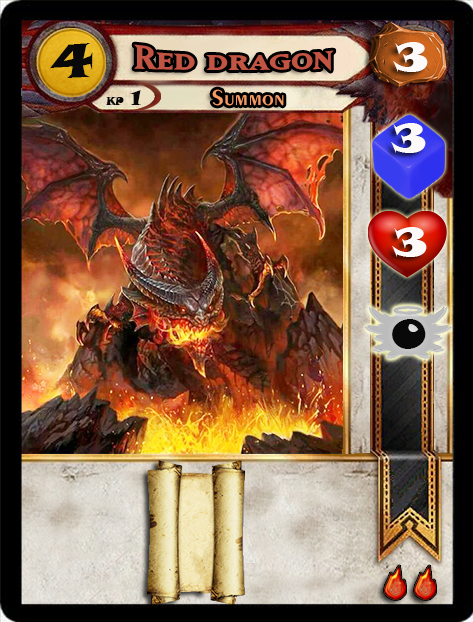
<style>
.page{position:relative;width:473px;height:622px}
.page>*{position:absolute;margin:0}
.t1{font:46.6px "SnapITC-Regular";color:#090909;scale:1.05 1}
.t2{font:40px "SnapITC-Regular";color:#fef9f9;scale:1.05 1}
.t3{font:22.7px "Exotic350BT-DemiBold";color:#f89c64;scale:1.06 1}
.t4{font:20.5px "SnapITC-Regular";color:#090909}
.t5{font:40px "SnapITC-Regular";color:#090909;scale:1.05 1}
</style>
<div class="page">
<p class="t1" style="left:50px;top:43px;width:43px;height:35px">4</p>
<p class="t2" style="left:393px;top:42px;width:35px;height:30px">3</p>
<p class="t3" style="left:212px;top:89px;width:72px;height:17px">Summon</p>
<p class="t4" style="left:130px;top:90px;width:11px;height:15px">1</p>
<p class="t2" style="left:391px;top:123px;width:35px;height:30px">3</p>
<p class="t2" style="left:392px;top:227px;width:35px;height:30px">3</p>
<p class="t5" style="left:392px;top:319px;width:34px;height:30px">0</p>
</div>
